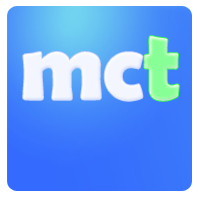
<style>
.page{position:relative;width:200px;height:200px}
.page>*{position:absolute;margin:0}
.t1{font:98.5px "BerlinSansFBDemi-Bold";color:#8aff97}
.t2{font:98.5px "BerlinSansFBDemi-Bold";color:#f3f6ff}
</style>
<div class="page">
<p class="t1" style="left:144px;top:36px;width:35px;height:65px">t</p>
<p class="t2" style="left:23px;top:52px;width:78px;height:48px">m</p>
<p class="t2" style="left:104px;top:52px;width:39px;height:49px">c</p>
</div>
